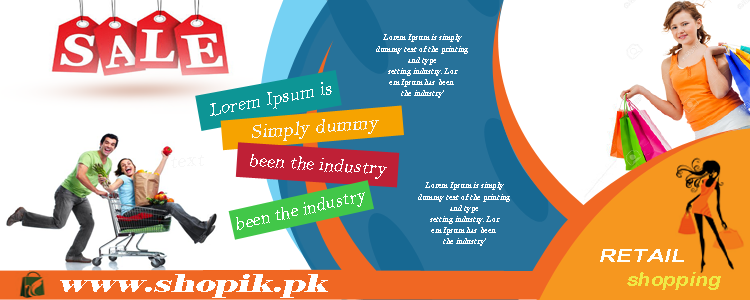
<style>
.page{position:relative;width:750px;height:300px;background:#ffffff}
.page>*{position:absolute;margin:0}
.t1{font:9.2px "BellMT";color:#ffffff;font-style:italic;scale:0.83 1}
.t2{font:19px "BellMT";color:#ffffff;font-style:italic}
.t3{font:19.1px "BellMT";color:#ffffff;font-style:italic}
.t4{font:19.1px "BellMT";color:#ffffff;font-style:italic;scale:0.96 1}
.t5{font:18px "ArialRoundedMTBold";color:#fffffa;font-style:italic;scale:1.32 1}
.t6{font:25.4px "Elephant-Regular";letter-spacing:0.01em;color:#ffffff;font-style:italic;scale:1.42 1}
.t7{font:19.1px "ArialRoundedMTBold";color:#efea46;font-style:italic;scale:1.13 1}
</style>
<div class="page">
<p class="t1" style="left:376px;top:34px;width:92px;height:64px;text-align:center">Lorem Ipsum is simply<br> dummy text of the printing <br>and type<br>setting industry. Lor<br>em Ipsum has been <br>the industry'</p>
<p class="t2" style="left:210px;top:82px;width:122px;height:34px;rotate:-10deg">Lorem Ipsum is</p>
<p class="t3" style="left:250px;top:154px;width:137px;height:25px;rotate:4deg">been the industry</p>
<p class="t1" style="left:418px;top:182px;width:92px;height:64px;text-align:center">Lorem Ipsum is simply<br> dummy text of the printing <br>and type<br>setting industry. Lor<br>em Ipsum has been <br>the industry'</p>
<p class="t4" style="left:236px;top:192px;width:129px;height:38px;rotate:-13deg">been the industry</p>
<p class="t5" style="left:600px;top:249px;width:84px;height:13px">RETAIL</p>
<p class="t6" style="left:60px;top:274px;width:268px;height:24px">www.shopik.pk</p>
<p class="t7" style="left:627px;top:272px;width:94px;height:18px">shopping</p>
</div>
